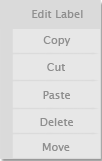
<style>
.page{position:relative;width:102px;height:161px;background:#e7e7e7}
.page>*{position:absolute;margin:0}
.t1{font:11px "LucidaSansUnicode";color:#8f8f8f}
</style>
<div class="page">
<p class="t1" style="left:32px;top:10px;width:51px;height:8px">Edit Label</p>
<p class="t1" style="left:43px;top:36px;width:28px;height:10px">Copy</p>
<p class="t1" style="left:47px;top:63px;width:18px;height:8px">Cut</p>
<p class="t1" style="left:43px;top:91px;width:27px;height:8px">Paste</p>
<p class="t1" style="left:40px;top:118px;width:33px;height:8px">Delete</p>
<p class="t1" style="left:42px;top:143px;width:28px;height:8px">Move</p>
</div>
